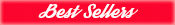
<style>
.page{position:relative;width:175px;height:25px;background:#fb042d}
.page>*{position:absolute;margin:0}
.t1{font:14.2px "Streetwear";color:#fdfcfc;scale:1.07 1}
</style>
<div class="page">
<p class="t1" style="left:38px;top:3px;width:100px;height:15px">Best Sellers</p>
</div>
